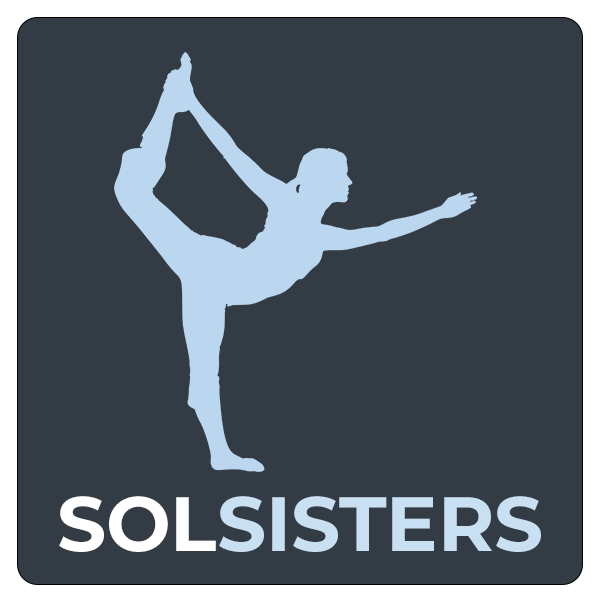
<style>
.page{position:relative;width:600px;height:600px;background:#333c44}
.page>*{position:absolute;margin:0}
.t1{font:76.8px "Montserrat-Bold";color:#bbd7ef;text-transform:uppercase}
.t2{font:76.8px "Montserrat-Bold";color:#ffffff;text-transform:uppercase}
</style>
<div class="page">
<p class="t1" style="left:59px;top:496px;width:482px;height:56px"><span class="t2">Sol</span>Sisters</p>
</div>
